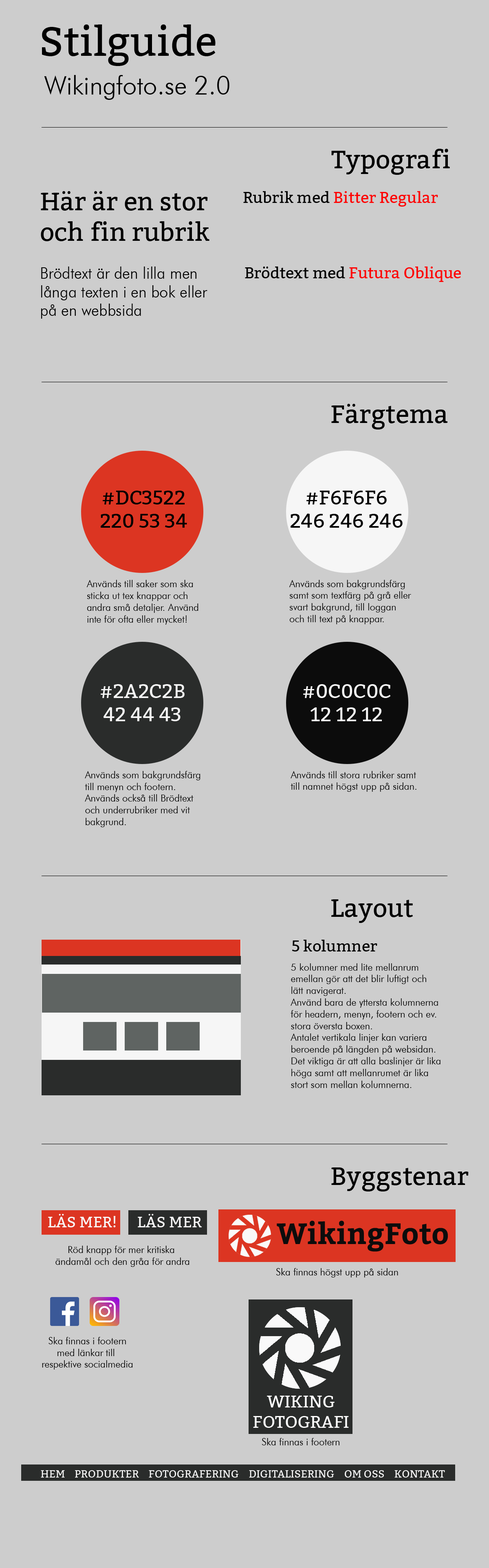
<style>
.page{position:relative;width:489px;height:1568px;background:#cdcdcd}
.page>*{position:absolute;margin:0}
.t1{font:40.7px "Bitter-Regular";color:#000000}
.t2{font:25.3px "FuturaOblique";color:#000000}
.t3{font:25.3px "Bitter-Regular";color:#000000}
.t4{font:15.5px "Bitter-Regular";color:#ff0000}
.t5{font:15.5px "Bitter-Regular";color:#000000}
.t6{font:15.5px "FuturaOblique";color:#000000}
.t7{font:19.6px "Bitter-Regular";color:#000000}
.t8{font:9.8px "FuturaOblique";color:#000000}
.t9{font:19.6px "Bitter-Regular";color:#f6f6f6}
.t10{font:15.3px "Bitter-Regular";color:#f9f9f9}
.t11{font:29.3px "Bitter-Bold";color:#0c0c0c}
.t12{font:17px "Bitter-Regular";color:#ffffff}
.t13{font:10.6px "Bitter-Regular";color:#f9f9f9}
</style>
<div class="page">
<p class="t1" style="left:42px;top:24px;width:174px;height:42px">Stilguide</p>
<p class="t2" style="left:44px;top:75px;width:185px;height:25px">Wikingfoto.se 2.0</p>
<p class="t3" style="left:331px;top:149px;width:119px;height:26px">Typografi</p>
<p class="t3" style="left:41px;top:191px;width:168px;height:50px">Här är en stor och fin rubrik</p>
<p class="t4" style="left:243px;top:191px;width:195px;height:16px"><span class="t5">Rubrik med </span>Bitter Regular</p>
<p class="t6" style="left:41px;top:266px;width:166px;height:53px">Brödtext är den lilla men långa texten i en bok eller på en webbsida</p>
<p class="t4" style="left:245px;top:266px;width:216px;height:16px"><span class="t5">Brödtext med </span>Futura Oblique</p>
<p class="t3" style="left:331px;top:404px;width:117px;height:25px">Färgtema</p>
<p class="t7" style="left:101px;top:491px;width:86px;height:37px;text-align:center">#DC3522<br>220 53 34</p>
<p class="t7" style="left:291px;top:491px;width:112px;height:37px;text-align:center">#F6F6F6<br>246 246 246</p>
<p class="t8" style="left:86px;top:580px;width:112px;height:45px">Används till saker som ska<br>sticka ut tex knappar och <br>andra små detaljer. Använd <br>inte för ofta eller mycket!</p>
<p class="t8" style="left:289px;top:580px;width:122px;height:44px">Används som bakgrundsfärg<br>samt som textfärg på grå eller<br>svart bakgrund, till loggan<br>och till text på knappar.</p>
<p class="t9" style="left:101px;top:684px;width:84px;height:37px;text-align:center">#2A2C2B<br>42 44 43</p>
<p class="t9" style="left:303px;top:684px;width:88px;height:37px;text-align:center">#0C0C0C<br>12 12 12</p>
<p class="t8" style="left:85px;top:771px;width:115px;height:56px">Används som bakgrundsfärg<br>till menyn och footern.<br>Används också till Brödtext <br>och underrubriker med vit <br>bakgrund.</p>
<p class="t8" style="left:291px;top:771px;width:125px;height:21px">Används till stora rubriker samt <br>till namnet högst upp på sidan.</p>
<p class="t3" style="left:331px;top:899px;width:82px;height:24px">Layout</p>
<p class="t5" style="left:292px;top:940px;width:85px;height:11px">5 kolumner</p>
<p class="t8" style="left:291px;top:963px;width:149px;height:125px">5 kolumner med lite mellanrum<br>emellan gör att det blir luftigt och<br>lätt navigerat.<br>Använd bara de yttersta kolumnerna <br>för headern, menyn, footern och ev. <br>stora översta boxen.<br>Antalet vertikala linjer kan variera<br>beroende på längden på websidan.<br>Det viktiga är att alla baslinjer är lika <br>höga samt att mellanrumet är lika<br>stort som mellan kolumnerna.</p>
<p class="t3" style="left:331px;top:1167px;width:138px;height:24px">Byggstenar</p>
<p class="t10" style="left:48px;top:1214px;width:68px;height:13px">LÄS MER!</p>
<p class="t10" style="left:138px;top:1214px;width:64px;height:13px">LÄS MER</p>
<p class="t11" style="left:277px;top:1220px;width:171px;height:32px">WikingFoto</p>
<p class="t8" style="left:55px;top:1246px;width:134px;height:21px;text-align:center">Röd knapp för mer kritiska <br>ändamål och den gråa för andra</p>
<p class="t8" style="left:276px;top:1268px;width:122px;height:9px">Ska finnas högst upp på sidan</p>
<p class="t8" style="left:42px;top:1337px;width:91px;height:33px;text-align:center">Ska finnas i footern<br>med länkar till <br>respektive socialmedia</p>
<p class="t12" style="left:253px;top:1396px;width:96px;height:32px;text-align:center">WIKING<br>FOTOGRAFI</p>
<p class="t8" style="left:262px;top:1438px;width:77px;height:7px">Ska finnas i footern</p>
<p class="t13" style="left:41px;top:1470px;width:404px;height:8px">HEM    PRODUKTER    FOTOGRAFERING    DIGITALISERING    OM OSS    KONTAKT</p>
</div>
